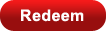
<style>
.page{position:relative;width:106px;height:31px;background:#980e0e}
.page>*{position:absolute;margin:0}
.t1{font:16px "Arial-BoldMT";letter-spacing:0.014em;color:#ffffff}
</style>
<div class="page">
<p class="t1" style="left:21px;top:9px;width:63px;height:13px">Redeem</p>
</div>
